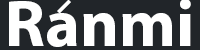
<style>
.page{position:relative;width:200px;height:50px;background:#212529}
.page>*{position:absolute;margin:0}
.t1{font:66.7px "MyriadPro-Bold";color:#ffffff}
.t2{font:22.8px "MyriadPro-Bold";color:#ffffff}
</style>
<div class="page">
<p class="t1" style="left:9px;top:0px;width:182px;height:47px">Ranmi</p>
<p class="t2" style="left:57px;top:0px;width:14px;height:14px;rotate:-135deg">l</p>
</div>
